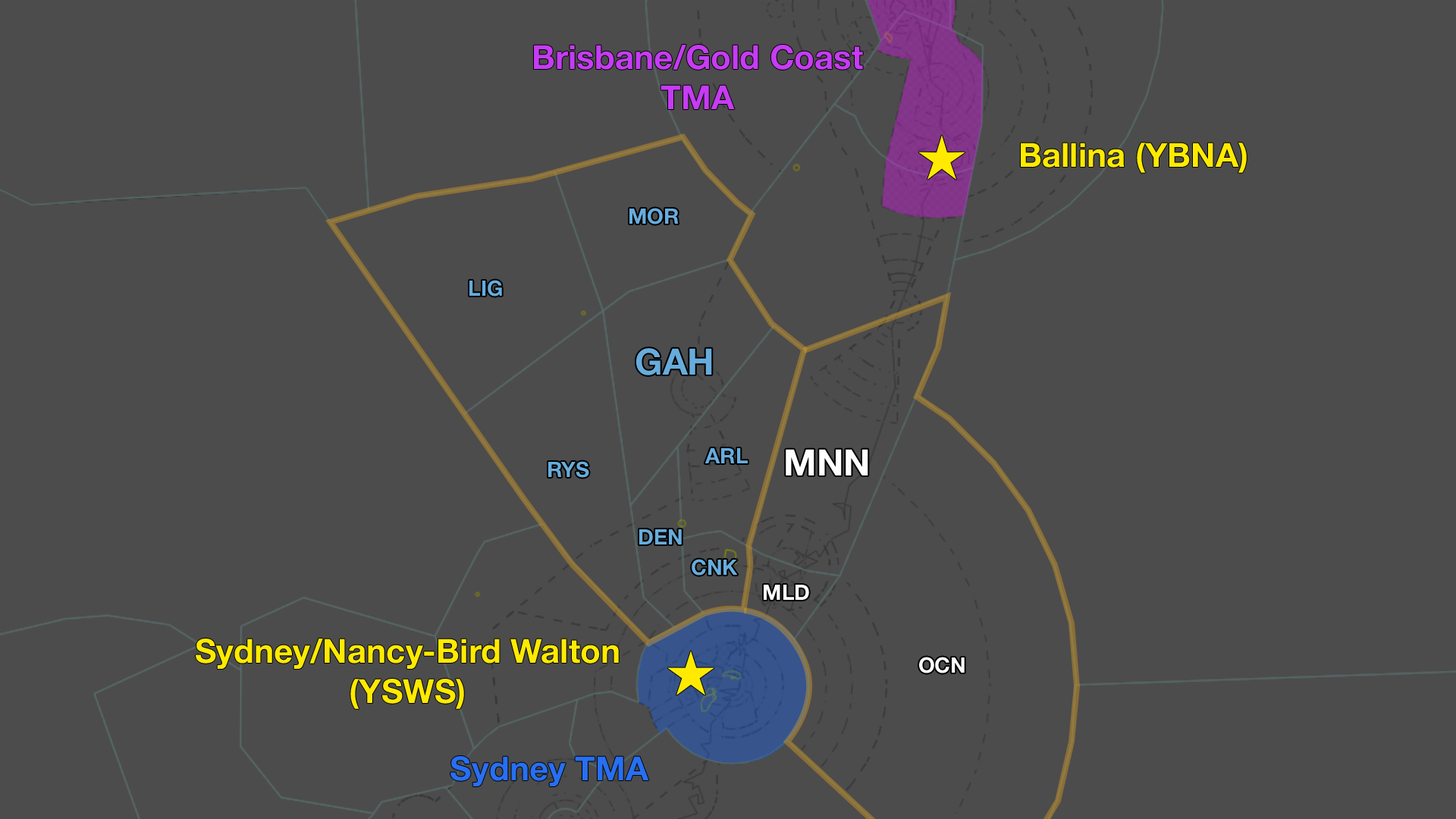
<style>
.page{position:relative;width:1456px;height:819px;background:#4c4c4c}
.page>*{position:absolute;margin:0}
.t1{font:33.4px "HelveticaNeue-Bold";color:#c63bf4}
.t2{font:33.4px "HelveticaNeue-Bold";color:#ffea00}
.t3{font:21.2px "HelveticaNeue-Bold";color:#67acdc}
.t4{font:36.4px "HelveticaNeue-Bold";color:#67acdc}
.t5{font:36.4px "HelveticaNeue-Bold";color:#ffffff}
.t6{font:21.2px "HelveticaNeue-Bold";color:#ffffff}
.t7{font:33.4px "HelveticaNeue-Bold";color:#276ff3}
</style>
<div class="page">
<p class="t1" style="left:534px;top:45px;width:329px;height:64px;text-align:center">Brisbane/Gold Coast<br>TMA</p>
<p class="t2" style="left:1021px;top:143px;width:226px;height:30px">Ballina (YBNA)</p>
<p class="t3" style="left:629px;top:208px;width:50px;height:16px">MOR</p>
<p class="t3" style="left:469px;top:280px;width:33px;height:17px">LIG</p>
<p class="t4" style="left:636px;top:348px;width:76px;height:27px">GAH</p>
<p class="t3" style="left:704px;top:448px;width:44px;height:15px">ARL</p>
<p class="t5" style="left:786px;top:449px;width:82px;height:26px">MNN</p>
<p class="t3" style="left:548px;top:461px;width:41px;height:17px">RYS</p>
<p class="t3" style="left:639px;top:529px;width:43px;height:15px">DEN</p>
<p class="t3" style="left:692px;top:559px;width:46px;height:17px">CNK</p>
<p class="t6" style="left:764px;top:585px;width:45px;height:15px">MLD</p>
<p class="t2" style="left:196px;top:639px;width:423px;height:70px;text-align:center">Sydney/Nancy-Bird Walton<br>(YSWS)</p>
<p class="t6" style="left:919px;top:657px;width:46px;height:16px">OCN</p>
<p class="t7" style="left:450px;top:756px;width:199px;height:30px">Sydney TMA</p>
</div>
